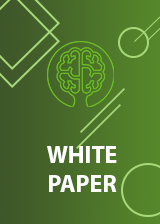
<style>
.page{position:relative;width:160px;height:224px}
.page>*{position:absolute;margin:0}
.t1{font:24px "MyriadPro-Bold";color:#ffffff}
</style>
<div class="page">
<p class="t1" style="left:47px;top:146px;width:70px;height:46px;text-align:center">WHITE<br>PAPER</p>
</div>
